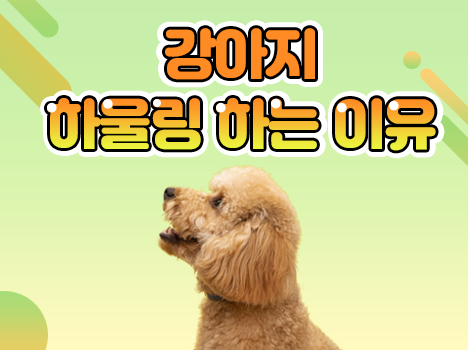
<style>
.page{position:relative;width:468px;height:350px}
.page>*{position:absolute;margin:0}
.t1{font:54.2px "Jalnan";letter-spacing:-0.025em;color:#ff8b24}
.t2{font:54.2px "Jalnan";letter-spacing:-0.025em}
</style>
<div class="page">
<p class="t1" style="left:164px;top:28px;width:151px;height:52px">강아지</p>
<p class="t1" style="left:165px;top:28px;width:150px;height:52px">강아지</p>
<p class="t2" style="left:47px;top:98px;width:389px;height:53px">하울링 하는 이유</p>
<p class="t2" style="left:48px;top:98px;width:389px;height:53px">하울링 하는 이유</p>
</div>
